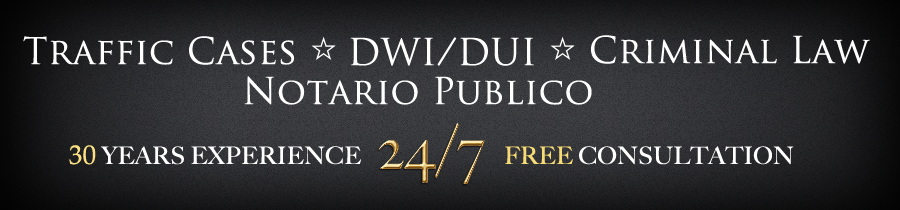
<style>
.page{position:relative;width:900px;height:210px}
.page>*{position:absolute;margin:0}
.t1{font:36px "TrajanPro-Regular";letter-spacing:0.01em;color:#ffffff}
.t2{font:60px "BigCaslon-Medium";letter-spacing:0.01em}
.t3{font:24px "BigCaslon-Medium";letter-spacing:0.01em;color:#ffffff}
.t4{font:27px "Palatino-Roman";letter-spacing:0.01em;color:#fadf83}
.t5{font:24px "BigCaslon-Medium";letter-spacing:0.01em;color:#f7dc75}
</style>
<div class="page">
<p class="t1" style="left:23px;top:36px;width:271px;height:29px">Traffic Cases</p>
<p class="t1" style="left:350px;top:37px;width:184px;height:29px">DWI/DUI</p>
<p class="t1" style="left:591px;top:35px;width:279px;height:29px">Criminal Law</p>
<p class="t1" style="left:244px;top:76px;width:348px;height:29px">Notario Publico</p>
<p class="t2" style="left:378px;top:123px;width:107px;height:61px">24/7</p>
<p class="t3" style="left:69px;top:145px;width:292px;height:20px"><span class="t4">30</span> YEARS EXPERIENCE</p>
<p class="t3" style="left:505px;top:146px;width:289px;height:19px"><span class="t5">FREE</span> CONSULTATION</p>
</div>
